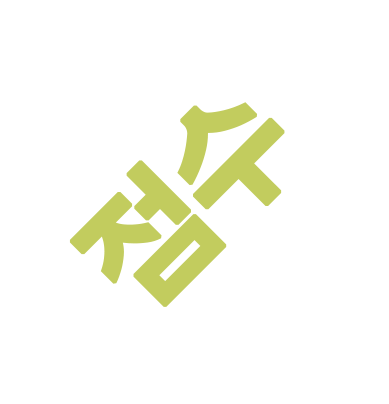
<style>
.page{position:relative;width:389px;height:404px;background:#ffffff}
.page>*{position:absolute;margin:0}
.t1{font:142.4px "BMHANNA11yrsold";letter-spacing:-0.04em;color:#c2cc5e;font-weight:bold}
</style>
<div class="page">
<p class="t1" style="left:69px;top:102px;width:216px;height:205px;rotate:-45deg">점수</p>
</div>
